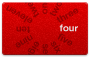
<style>
.page{position:relative;width:90px;height:58px}
.page>*{position:absolute;margin:0}
.t1{font:9.5px "HelveticaNeue-Bold";color:#950000}
.t2{font:9.5px "HelveticaNeue-Bold";color:#7d0000}
.t3{font:9.5px "HelveticaNeue-Bold";color:#e6e6e6}
</style>
<div class="page">
<p class="t1" style="left:6px;top:5px;width:27px;height:18px;rotate:-150deg">eleven</p>
<p class="t1" style="left:49px;top:1px;width:13px;height:15px;rotate:-60deg">two</p>
<p class="t2" style="left:56px;top:8px;width:23px;height:15px;rotate:-30deg;opacity:0.7">three</p>
<p class="t2" style="left:16px;top:26px;width:14px;height:7px;rotate:180deg;opacity:0.7">ten</p>
<p class="t3" style="left:59px;top:24px;width:19px;height:8px">four</p>
<p class="t2" style="left:15px;top:34px;width:18px;height:14px;rotate:150deg;opacity:0.7">nine</p>
<p class="t2" style="left:51px;top:41px;width:10px;height:13px;rotate:60deg;opacity:0.7">six</p>
<p class="t2" style="left:57px;top:33px;width:16px;height:13px;rotate:30deg;opacity:0.7">five</p>
</div>
